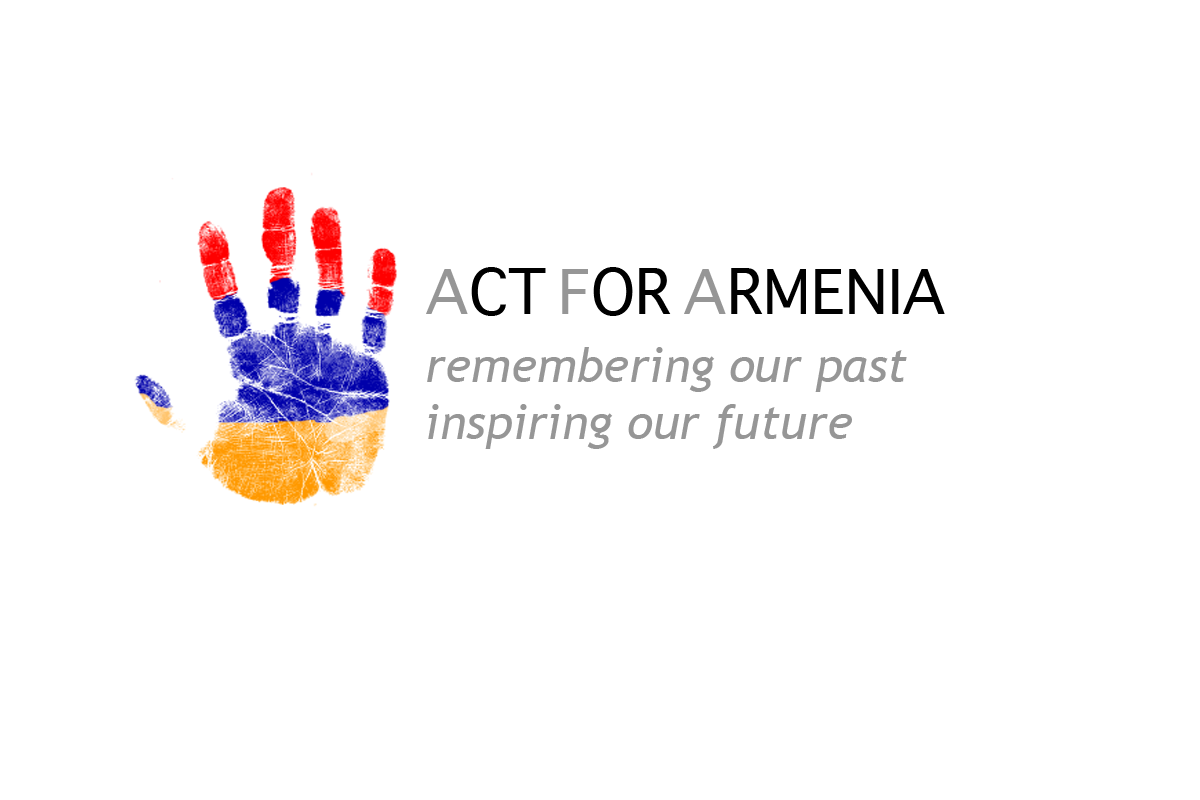
<style>
.page{position:relative;width:1200px;height:800px;background:#ffffff}
.page>*{position:absolute;margin:0}
.t1{font:48px "TrebuchetMS-Italic";color:#969696}
.t2{font:60px "Sathu";color:#969696}
.t3{font:60px "Sathu";color:#000000}
</style>
<div class="page">
<p class="t1" style="left:426px;top:267px;width:519px;height:182px"><span class="t2">A</span><span class="t3">CT </span><span class="t2">F</span><span class="t3">OR </span><span class="t2">A</span><span class="t3">RMENIA<br><br></span>remembering our past <br>inspiring our future</p>
</div>
